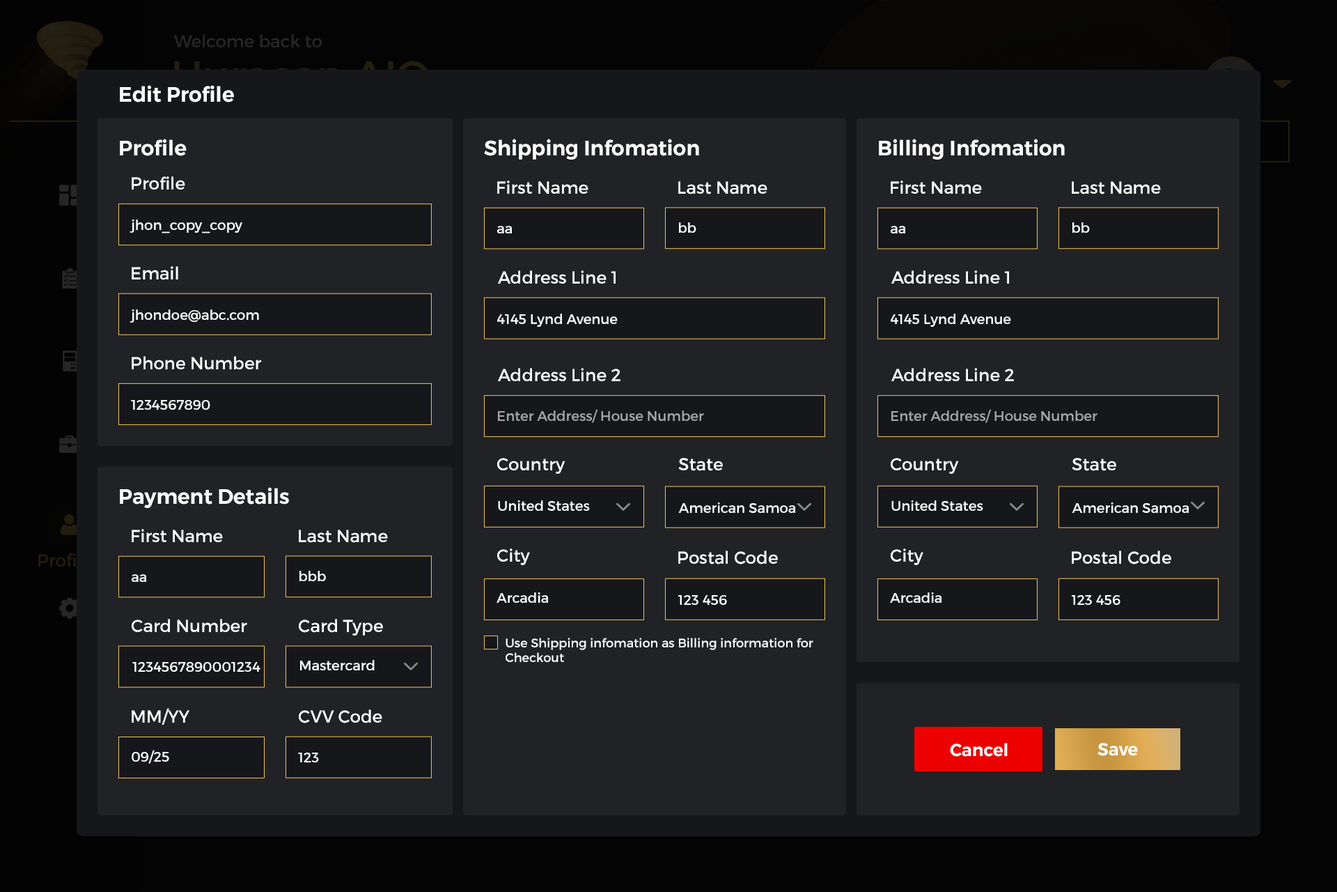
<style>
.page{position:relative;width:1337px;height:892px;background:#212225}
.page>*{position:absolute;margin:0}
.t1{font:20.9px "Montserrat-SemiBold";color:#ffffff}
.t2{font:17.4px "Montserrat-Regular";color:#ffffff}
.t3{font:13.9px "Montserrat-Regular";color:#ffffff}
.t4{font:13.9px "Montserrat-Regular";color:#a7a7a8}
.t5{font:12.5px "Montserrat-Regular";color:#ffffff}
.t6{font:17.4px "Montserrat-SemiBold";color:#ffffff}
</style>
<div class="page">
<p class="t1" style="left:120px;top:85px;width:114px;height:17px">Edit Profile</p>
<p class="t1" style="left:120px;top:139px;width:67px;height:17px">Profile</p>
<p class="t1" style="left:484px;top:139px;width:215px;height:21px">Shipping Infomation</p>
<p class="t1" style="left:879px;top:139px;width:186px;height:21px">Billing Infomation</p>
<p class="t2" style="left:132px;top:176px;width:53px;height:13px">Profile</p>
<p class="t2" style="left:497px;top:180px;width:92px;height:14px">First Name</p>
<p class="t2" style="left:678px;top:181px;width:90px;height:13px">Last Name</p>
<p class="t2" style="left:891px;top:180px;width:91px;height:14px">First Name</p>
<p class="t2" style="left:1072px;top:181px;width:89px;height:13px">Last Name</p>
<p class="t3" style="left:130px;top:219px;width:112px;height:14px">jhon_copy_copy</p>
<p class="t3" style="left:497px;top:226px;width:15px;height:7px">aa</p>
<p class="t3" style="left:679px;top:222px;width:18px;height:11px">bb</p>
<p class="t3" style="left:891px;top:226px;width:15px;height:7px">aa</p>
<p class="t3" style="left:1073px;top:222px;width:17px;height:11px">bb</p>
<p class="t2" style="left:132px;top:266px;width:46px;height:14px">Email</p>
<p class="t2" style="left:498px;top:270px;width:118px;height:14px">Address Line 1</p>
<p class="t2" style="left:892px;top:270px;width:117px;height:14px">Address Line 1</p>
<p class="t3" style="left:130px;top:309px;width:129px;height:14px">jhondoe@abc.com</p>
<p class="t3" style="left:497px;top:313px;width:121px;height:14px">4145 Lynd Avenue</p>
<p class="t3" style="left:891px;top:313px;width:120px;height:14px">4145 Lynd Avenue</p>
<p class="t2" style="left:132px;top:356px;width:129px;height:13px">Phone Number</p>
<p class="t2" style="left:498px;top:368px;width:123px;height:13px">Address Line 2</p>
<p class="t2" style="left:892px;top:368px;width:122px;height:13px">Address Line 2</p>
<p class="t3" style="left:131px;top:400px;width:79px;height:10px">1234567890</p>
<p class="t4" style="left:498px;top:409px;width:206px;height:14px">Enter Address/ House Number</p>
<p class="t4" style="left:892px;top:409px;width:206px;height:14px">Enter Address/ House Number</p>
<p class="t2" style="left:497px;top:458px;width:69px;height:16px">Country</p>
<p class="t2" style="left:678px;top:458px;width:45px;height:13px">State</p>
<p class="t2" style="left:891px;top:458px;width:68px;height:16px">Country</p>
<p class="t2" style="left:1072px;top:458px;width:45px;height:13px">State</p>
<p class="t1" style="left:120px;top:487px;width:169px;height:21px">Payment Details</p>
<p class="t3" style="left:498px;top:500px;width:92px;height:11px">United States</p>
<p class="t3" style="left:678px;top:502px;width:117px;height:11px">American Samoa</p>
<p class="t3" style="left:892px;top:500px;width:92px;height:11px">United States</p>
<p class="t3" style="left:1072px;top:502px;width:117px;height:11px">American Samoa</p>
<p class="t2" style="left:132px;top:529px;width:91px;height:13px">First Name</p>
<p class="t2" style="left:299px;top:529px;width:89px;height:14px">Last Name</p>
<p class="t2" style="left:497px;top:548px;width:33px;height:17px">City</p>
<p class="t2" style="left:678px;top:550px;width:100px;height:14px">Postal Code</p>
<p class="t2" style="left:891px;top:548px;width:33px;height:17px">City</p>
<p class="t2" style="left:1072px;top:550px;width:100px;height:14px">Postal Code</p>
<p class="t3" style="left:132px;top:574px;width:14px;height:8px">aa</p>
<p class="t3" style="left:300px;top:570px;width:26px;height:11px">bbb</p>
<p class="t3" style="left:497px;top:592px;width:51px;height:11px">Arcadia</p>
<p class="t3" style="left:890px;top:592px;width:52px;height:11px">Arcadia</p>
<p class="t3" style="left:678px;top:595px;width:49px;height:10px">123 456</p>
<p class="t3" style="left:1072px;top:595px;width:49px;height:10px">123 456</p>
<p class="t2" style="left:132px;top:619px;width:115px;height:13px">Card Number</p>
<p class="t2" style="left:299px;top:619px;width:84px;height:16px">Card Type</p>
<p class="t5" style="left:506px;top:637px;width:308px;height:25px">Use Shipping infomation as Billing information for <br>Checkout</p>
<p class="t3" style="left:132px;top:662px;width:129px;height:9px">1234567890001234</p>
<p class="t3" style="left:300px;top:660px;width:75px;height:10px">Mastercard</p>
<p class="t2" style="left:132px;top:708px;width:57px;height:16px">MM/YY</p>
<p class="t2" style="left:299px;top:709px;width:83px;height:14px">CVV Code</p>
<p class="t3" style="left:132px;top:750px;width:37px;height:13px">09/25</p>
<p class="t6" style="left:950px;top:743px;width:58px;height:13px">Cancel</p>
<p class="t6" style="left:1098px;top:743px;width:40px;height:13px">Save</p>
<p class="t3" style="left:298px;top:752px;width:21px;height:10px">123</p>
</div>
